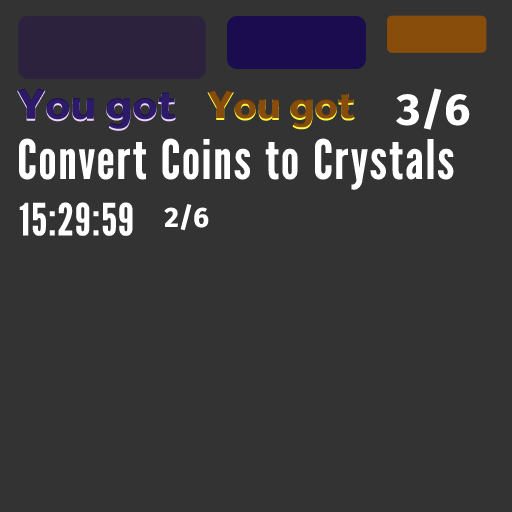
<style>
.page{position:relative;width:512px;height:512px;background:#333333}
.page>*{position:absolute;margin:0}
.t1{font:45px "MikadoBold";color:#2d1b6a}
.t2{font:44px "FiraSans-Bold";letter-spacing:0.025em;color:#ffffff;text-transform:uppercase;scale:1.05 1}
.t3{font:41.7px "MikadoBold";color:#894d0b}
.t4{font:54.1px "LeagueGothic";letter-spacing:0.025em;color:#ffffff;scale:1.05 1}
.t5{font:44px "LeagueGothic";letter-spacing:0.025em;color:#ffffff;scale:1.05 1}
.t6{font:27.8px "FiraSans-Bold";color:#ffffff}
</style>
<div class="page">
<p class="t1" style="left:17px;top:88px;width:159px;height:43px">You got</p>
<p class="t2" style="left:396px;top:88px;width:74px;height:42px">3/6</p>
<p class="t3" style="left:207px;top:90px;width:148px;height:40px">You got</p>
<p class="t4" style="left:19px;top:138px;width:435px;height:52px">Convert Coins to Crystals</p>
<p class="t5" style="left:19px;top:202px;width:114px;height:34px">15:29:59</p>
<p class="t6" style="left:164px;top:204px;width:45px;height:27px">2/6</p>
</div>
